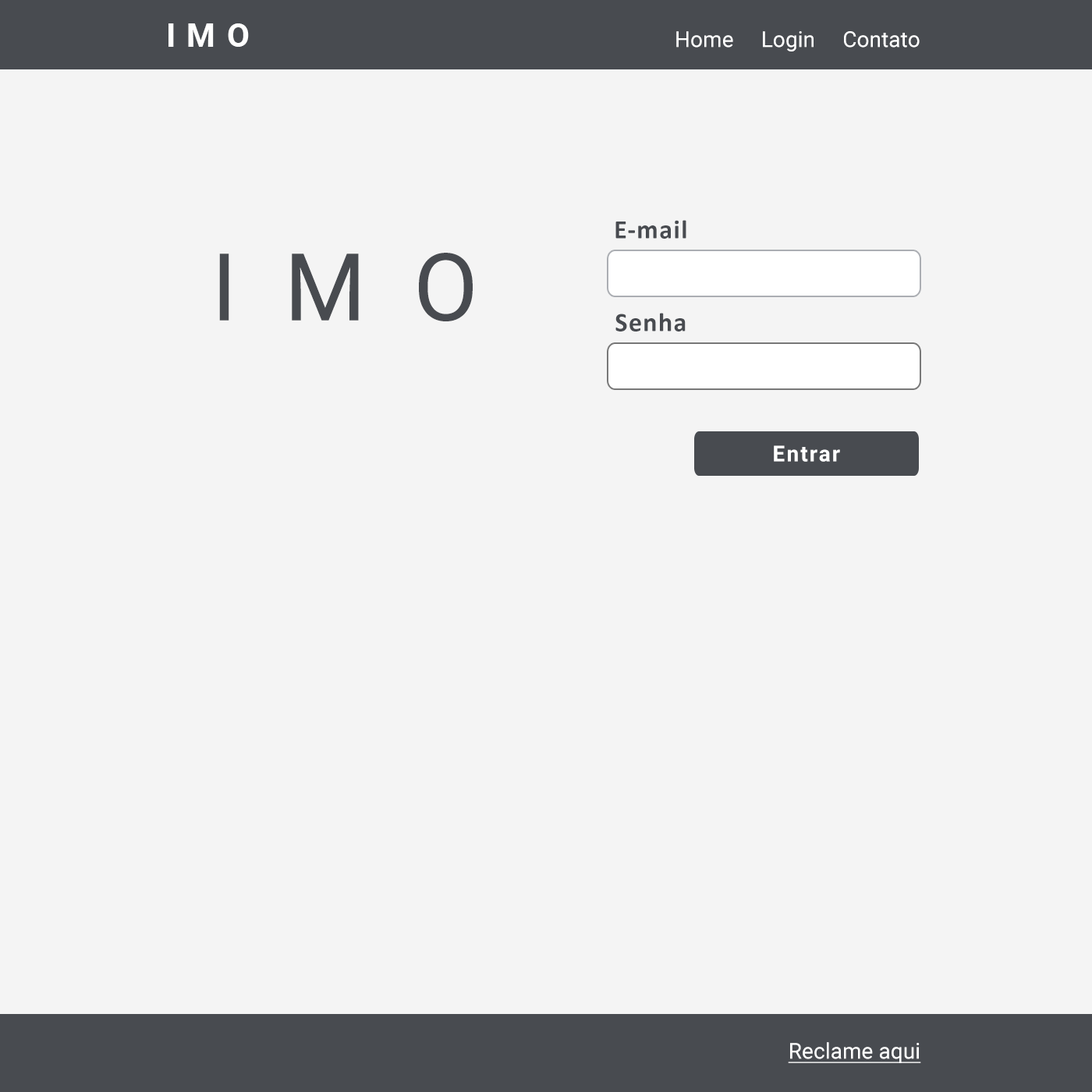
<style>
.page{position:relative;width:1092px;height:1092px;background:#f4f4f4}
.page>*{position:absolute;margin:0}
.t1{font:32.8px "Roboto-Bold";letter-spacing:0.05em;color:#ffffff}
.t2{font:21.8px "Roboto-Regular";letter-spacing:0.003em;color:#ffffff}
.t3{font:26.5px "Calibri-Bold";letter-spacing:0.04em;color:#484b50}
.t4{font:93.6px "Roboto-Regular";letter-spacing:0.13em;color:#484b50}
.t5{font:21.8px "Roboto-Bold";letter-spacing:0.075em;color:#ffffff}
.t6{font:21.8px "Roboto-Regular";letter-spacing:0.003em;color:#ffffff;text-decoration:underline}
</style>
<div class="page">
<p class="t1" style="left:168px;top:23px;width:81px;height:24px">I M O</p>
<p class="t2" style="left:676px;top:31px;width:244px;height:20px">Home     Login     Contato</p>
<p class="t3" style="left:615px;top:220px;width:71px;height:19px">E-mail</p>
<p class="t4" style="left:219px;top:253px;width:254px;height:68px">I M O</p>
<p class="t3" style="left:615px;top:313px;width:71px;height:18px">Senha</p>
<p class="t5" style="left:774px;top:445px;width:66px;height:17px">Entrar</p>
<p class="t6" style="left:788px;top:1042px;width:133px;height:21px">Reclame aqui</p>
</div>
